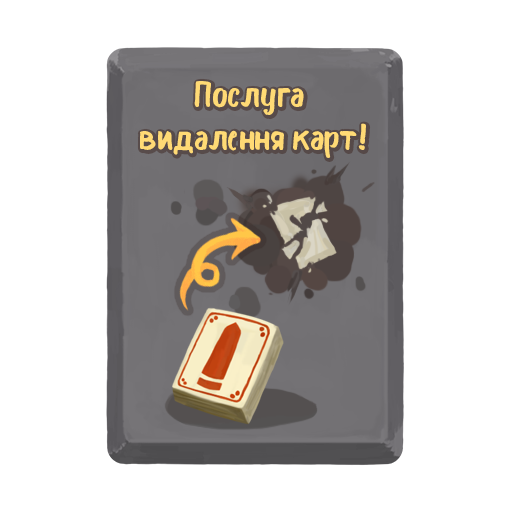
<style>
.page{position:relative;width:512px;height:512px;background:#ffffff}
.page>*{position:absolute;margin:0}
.t1{font:36px "Bosk";color:#ffda75}
</style>
<div class="page">
<p class="t1" style="left:140px;top:81px;width:226px;height:77px;text-align:center">Послуга <br>видалення карт!</p>
</div>
